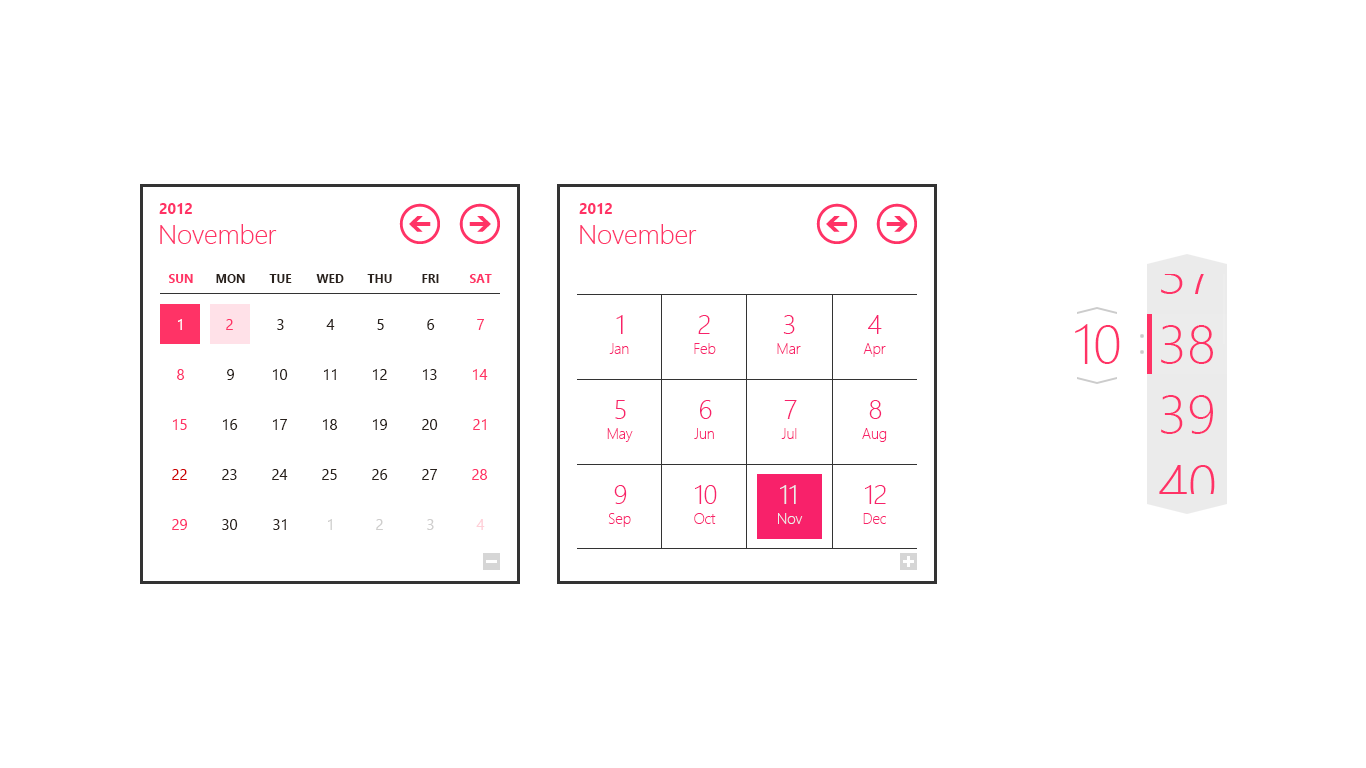
<style>
.page{position:relative;width:1366px;height:768px;background:#ffffff}
.page>*{position:absolute;margin:0}
.t1{font:14.7px "SegoeUI-Bold";color:#ff3366}
.t2{font:26.7px "SegoeUI-Light";color:#ff3366}
.t3{font:12px "SegoeUI-Bold";color:#ff3366;text-transform:uppercase}
.t4{font:12px "SegoeUI-Bold";color:#29211c;text-transform:uppercase}
.t5{font:26.7px "SegoeUI-Light";color:#f8216a}
.t6{font:15px "SegoeUI";color:#ffffff}
.t7{font:15px "SegoeUI";color:#ff3366}
.t8{font:15px "SegoeUI";color:#29211c}
.t9{font:56px "SegoeUI-Light";color:#ff3366}
.t10{font:14.7px "SegoeUI-Light";color:#f8216a}
.t11{font:15px "SegoeUI";color:#cc0000}
.t12{font:26.7px "SegoeUI-Light";color:#ebebeb}
.t13{font:15px "SegoeUI";color:#cfcecd}
.t14{font:15px "SegoeUI";color:#ffd0d8}
.t15{font:14.7px "SegoeUI-Light";color:#ebebeb}
</style>
<div class="page">
<p class="t1" style="left:159px;top:203px;width:33px;height:11px">2012</p>
<p class="t1" style="left:579px;top:203px;width:33px;height:11px">2012</p>
<p class="t2" style="left:160px;top:224px;width:117px;height:20px">November</p>
<p class="t2" style="left:580px;top:224px;width:117px;height:20px">November</p>
<p class="t3" style="left:168px;top:274px;width:25px;height:9px">Sun</p>
<p class="t4" style="left:216px;top:274px;width:29px;height:9px">Mon</p>
<p class="t4" style="left:269px;top:274px;width:23px;height:9px">Tue</p>
<p class="t4" style="left:316px;top:274px;width:28px;height:9px">Wed</p>
<p class="t4" style="left:367px;top:274px;width:25px;height:9px">Thu</p>
<p class="t4" style="left:422px;top:274px;width:17px;height:9px">Fri</p>
<p class="t3" style="left:469px;top:274px;width:23px;height:9px">Sat</p>
<p class="t5" style="left:616px;top:315px;width:7px;height:19px">1</p>
<p class="t5" style="left:698px;top:315px;width:12px;height:19px">2</p>
<p class="t5" style="left:783px;top:315px;width:12px;height:19px">3</p>
<p class="t5" style="left:868px;top:315px;width:14px;height:19px">4</p>
<p class="t6" style="left:178px;top:319px;width:4px;height:11px">1</p>
<p class="t7" style="left:226px;top:319px;width:7px;height:11px">2</p>
<p class="t8" style="left:277px;top:319px;width:7px;height:11px">3</p>
<p class="t8" style="left:326px;top:319px;width:9px;height:11px">4</p>
<p class="t8" style="left:377px;top:319px;width:7px;height:11px">5</p>
<p class="t8" style="left:427px;top:319px;width:8px;height:11px">6</p>
<p class="t7" style="left:477px;top:319px;width:7px;height:11px">7</p>
<p class="t9" style="left:1075px;top:324px;width:45px;height:40px">10</p>
<p class="t9" style="left:1161px;top:325px;width:52px;height:39px">38</p>
<p class="t9" style="left:1161px;top:325px;width:52px;height:39px">38</p>
<p class="t10" style="left:609px;top:343px;width:20px;height:11px">Jan</p>
<p class="t10" style="left:694px;top:343px;width:22px;height:11px">Feb</p>
<p class="t10" style="left:777px;top:343px;width:24px;height:11px">Mar</p>
<p class="t10" style="left:863px;top:343px;width:23px;height:14px">Apr</p>
<p class="t7" style="left:177px;top:369px;width:8px;height:11px">8</p>
<p class="t8" style="left:227px;top:369px;width:7px;height:11px">9</p>
<p class="t8" style="left:273px;top:369px;width:15px;height:11px">10</p>
<p class="t8" style="left:324px;top:369px;width:12px;height:11px">11</p>
<p class="t8" style="left:373px;top:369px;width:14px;height:11px">12</p>
<p class="t8" style="left:423px;top:369px;width:14px;height:11px">13</p>
<p class="t7" style="left:473px;top:369px;width:15px;height:11px">14</p>
<p class="t5" style="left:615px;top:400px;width:11px;height:19px">5</p>
<p class="t5" style="left:700px;top:400px;width:12px;height:19px">6</p>
<p class="t5" style="left:784px;top:400px;width:13px;height:19px">7</p>
<p class="t5" style="left:869px;top:400px;width:13px;height:19px">8</p>
<p class="t9" style="left:1161px;top:395px;width:52px;height:39px">39</p>
<p class="t7" style="left:173px;top:419px;width:14px;height:11px">15</p>
<p class="t8" style="left:223px;top:419px;width:15px;height:11px">16</p>
<p class="t8" style="left:273px;top:419px;width:14px;height:11px">17</p>
<p class="t8" style="left:323px;top:419px;width:15px;height:11px">18</p>
<p class="t8" style="left:373px;top:419px;width:14px;height:11px">19</p>
<p class="t8" style="left:422px;top:419px;width:16px;height:11px">20</p>
<p class="t7" style="left:473px;top:419px;width:13px;height:11px">21</p>
<p class="t10" style="left:607px;top:428px;width:26px;height:14px">May</p>
<p class="t10" style="left:694px;top:428px;width:20px;height:11px">Jun</p>
<p class="t10" style="left:781px;top:428px;width:16px;height:11px">Jul</p>
<p class="t10" style="left:862px;top:428px;width:25px;height:14px">Aug</p>
<p class="t11" style="left:172px;top:469px;width:15px;height:11px">22</p>
<p class="t8" style="left:222px;top:469px;width:15px;height:11px">23</p>
<p class="t8" style="left:272px;top:469px;width:16px;height:11px">24</p>
<p class="t8" style="left:322px;top:469px;width:15px;height:11px">25</p>
<p class="t8" style="left:372px;top:469px;width:16px;height:11px">26</p>
<p class="t8" style="left:422px;top:469px;width:15px;height:11px">27</p>
<p class="t7" style="left:472px;top:469px;width:16px;height:11px">28</p>
<p class="t5" style="left:614px;top:485px;width:13px;height:19px">9</p>
<p class="t5" style="left:695px;top:485px;width:22px;height:19px">10</p>
<p class="t12" style="left:780px;top:485px;width:16px;height:19px">11</p>
<p class="t5" style="left:865px;top:485px;width:21px;height:19px">12</p>
<p class="t7" style="left:172px;top:519px;width:15px;height:11px">29</p>
<p class="t8" style="left:222px;top:519px;width:16px;height:11px">30</p>
<p class="t8" style="left:273px;top:519px;width:13px;height:11px">31</p>
<p class="t13" style="left:328px;top:519px;width:4px;height:11px">1</p>
<p class="t13" style="left:376px;top:519px;width:7px;height:11px">2</p>
<p class="t13" style="left:427px;top:519px;width:7px;height:11px">3</p>
<p class="t14" style="left:476px;top:519px;width:9px;height:11px">4</p>
<p class="t10" style="left:608px;top:513px;width:23px;height:14px">Sep</p>
<p class="t10" style="left:694px;top:513px;width:22px;height:11px">Oct</p>
<p class="t15" style="left:778px;top:513px;width:25px;height:11px">Nov</p>
<p class="t10" style="left:863px;top:513px;width:23px;height:11px">Dec</p>
</div>
